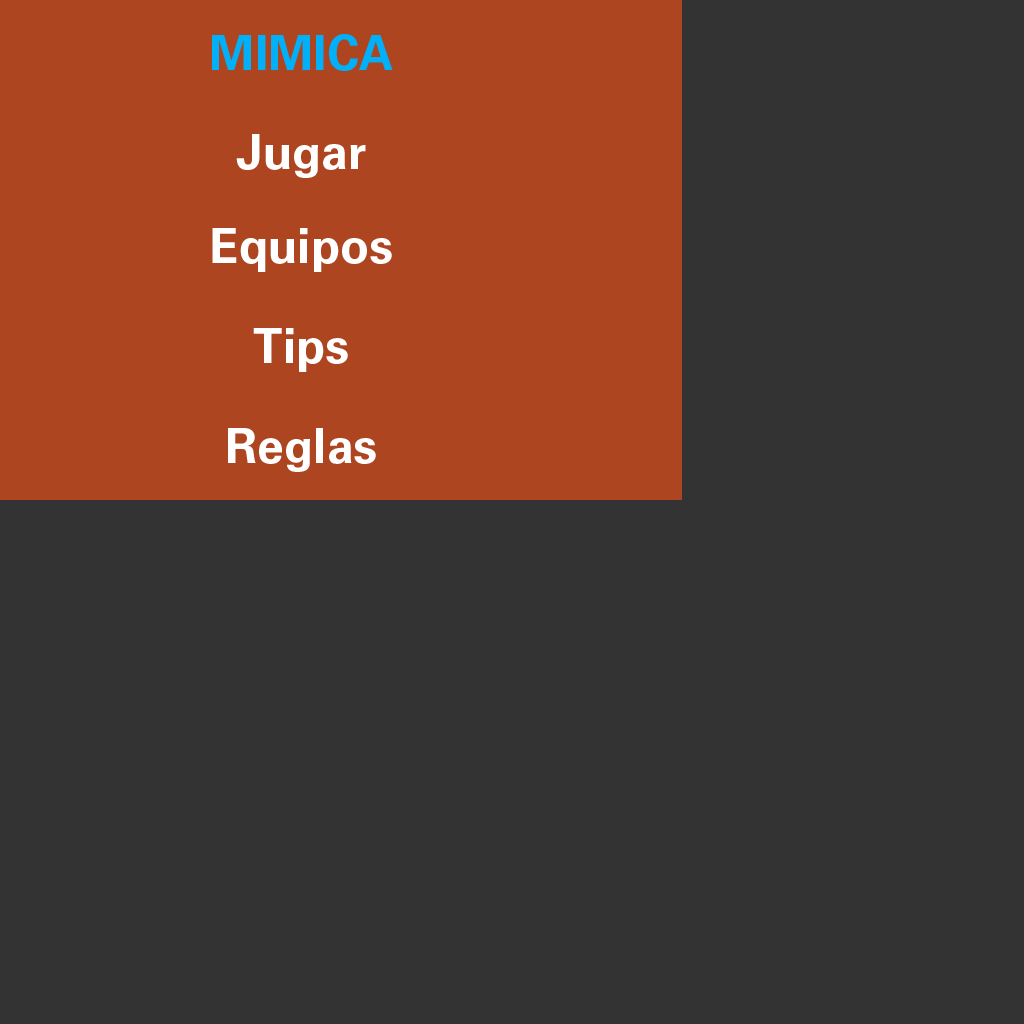
<style>
.page{position:relative;width:1024px;height:1024px;background:#333333}
.page>*{position:absolute;margin:0}
.t1{font:48px "UniversLTStd-Bold";color:#00b0f9}
.t2{font:48px "UniversLTStd-Bold";color:#ffffff}
</style>
<div class="page">
<p class="t1" style="left:212px;top:34px;width:181px;height:37px">MIMICA</p>
<p class="t2" style="left:236px;top:134px;width:130px;height:44px">Jugar</p>
<p class="t2" style="left:212px;top:228px;width:180px;height:44px">Equipos</p>
<p class="t2" style="left:253px;top:328px;width:95px;height:44px">Tips</p>
<p class="t2" style="left:228px;top:428px;width:148px;height:44px">Reglas</p>
</div>
